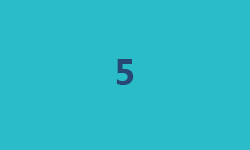
<style>
.page{position:relative;width:250px;height:150px;background:#2abdc9}
.page>*{position:absolute;margin:0}
.t1{font:36.7px "MyanmarText-Bold";color:#274875}
</style>
<div class="page">
<p class="t1" style="left:116px;top:59px;width:18px;height:26px">5</p>
</div>
